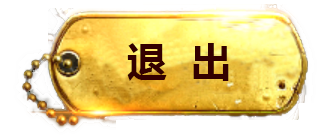
<style>
.page{position:relative;width:325px;height:140px;background:#ffffff}
.page>*{position:absolute;margin:0}
.t1{font:40px "MicrosoftYaHei-Bold";color:#330000}
</style>
<div class="page">
<p class="t1" style="left:127px;top:43px;width:102px;height:38px">退  出</p>
</div>
